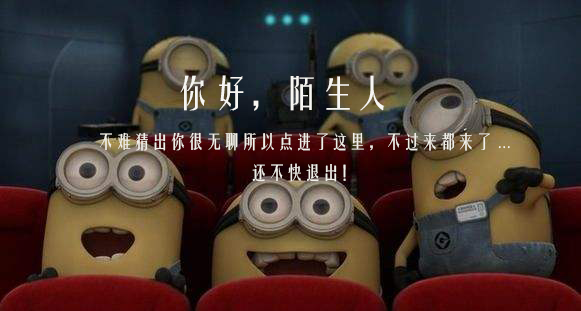
<style>
.page{position:relative;width:581px;height:311px}
.page>*{position:absolute;margin:0}
.t1{font:18px "FZYTK--GBK1-0";color:#f1efe8}
</style>
<div class="page">
<p class="t1" style="left:100px;top:132px;width:410px;height:50px">不难猜出你很无聊所以点进了这里，不过来都来了...<br>                                  还不快退出！</p>
</div>
